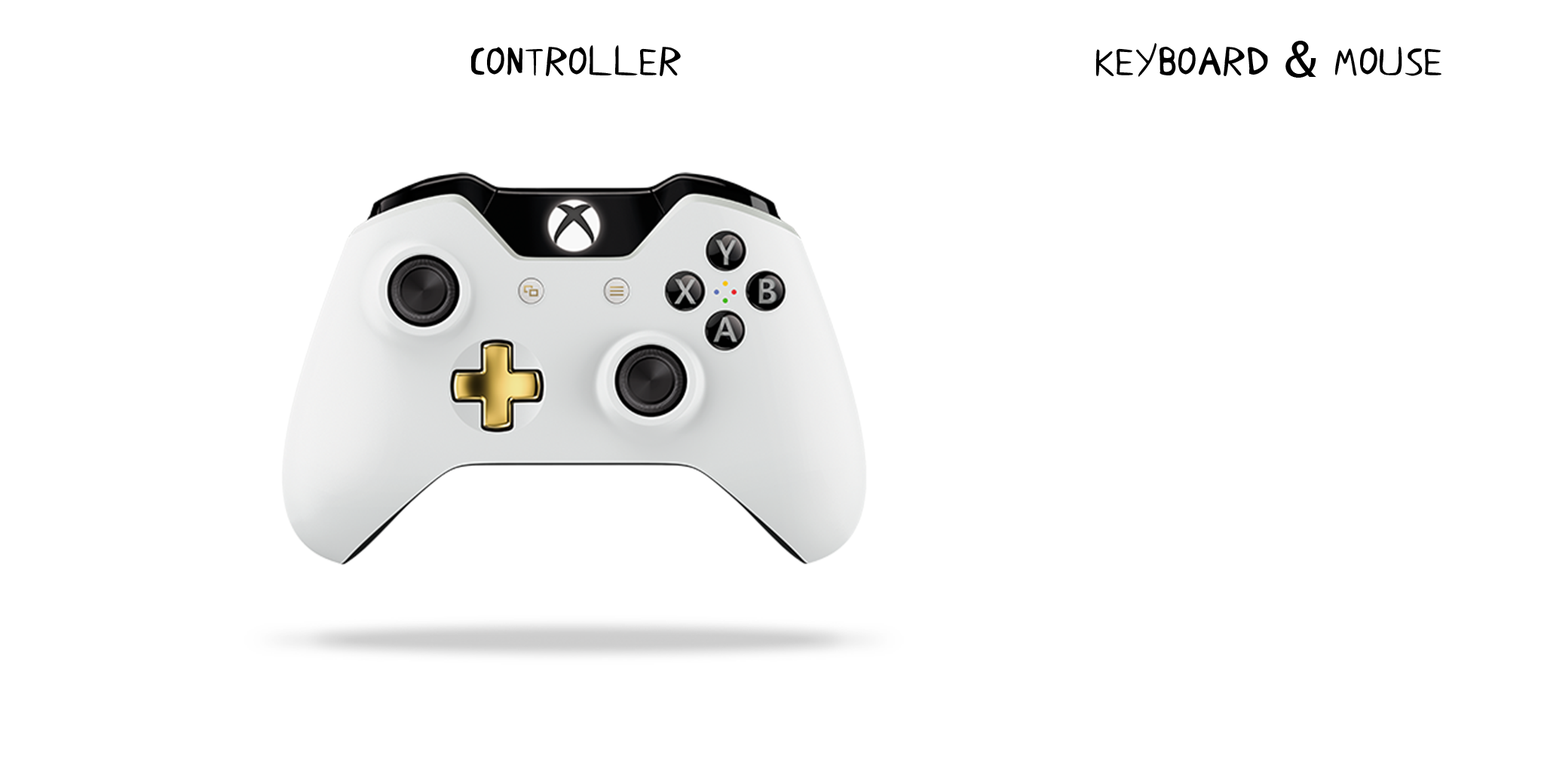
<style>
.page{position:relative;width:1544px;height:772px;background:#ffffff}
.page>*{position:absolute;margin:0}
.t1{font:49.4px "Spooktacle";color:#000000}
.t2{font:49.4px "LucidaSans";color:#000000}
</style>
<div class="page">
<p class="t1" style="left:1096px;top:41px;width:346px;height:37px">KEYBOARD <span class="t2">&amp; </span>MOUSE</p>
<p class="t1" style="left:471px;top:45px;width:210px;height:31px">CONTROLLER</p>
</div>
